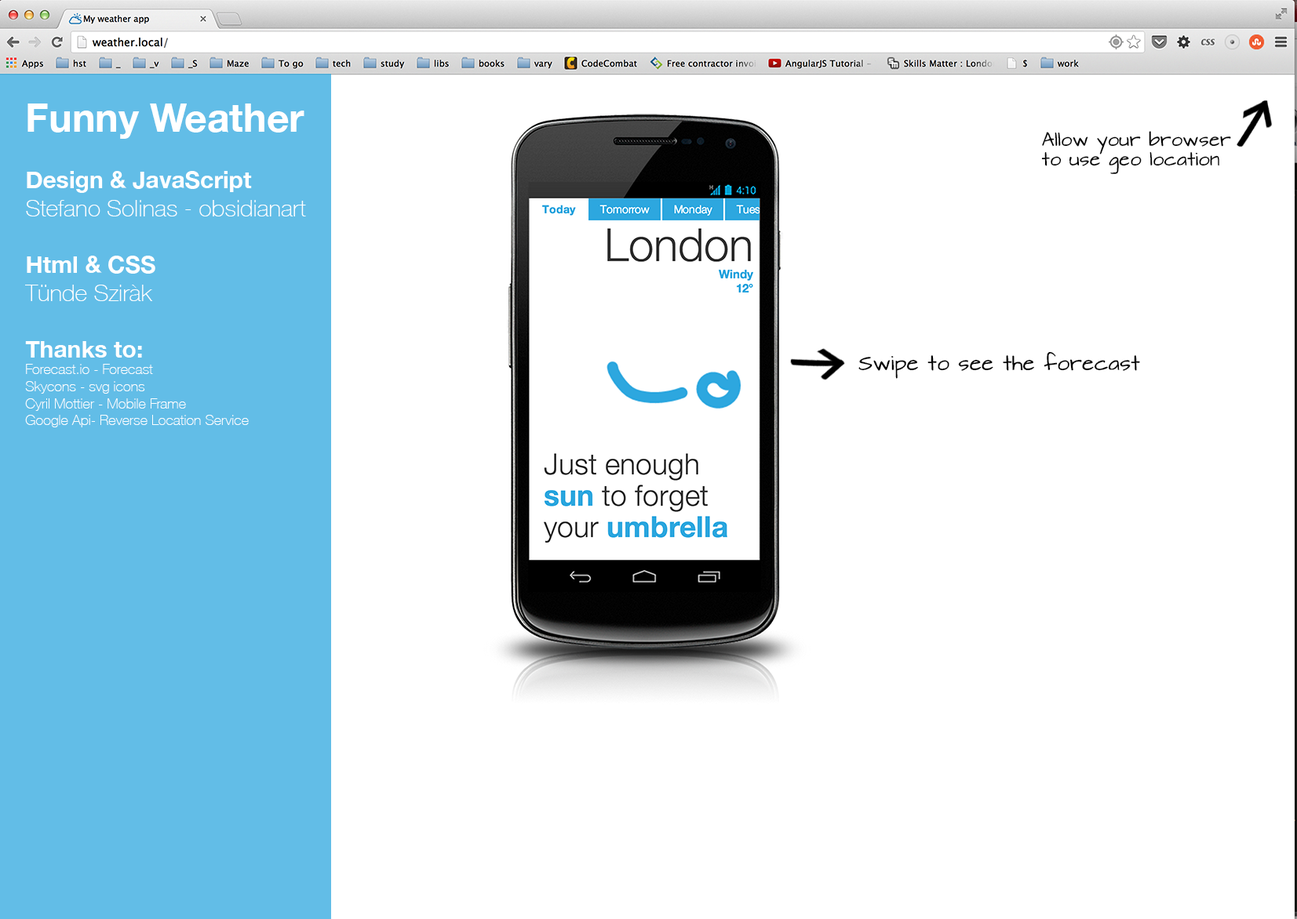
<style>
.page{position:relative;width:1297px;height:919px;background:#ffffff}
.page>*{position:absolute;margin:0}
.t1{font:14.1px "HelveticaNeue-Thin";color:#ffffff}
.t2{font:39.2px "HelveticaNeue-Bold";color:#ffffff}
.t3{font:23.5px "HelveticaNeue-Bold";color:#ffffff}
.t4{font:23.5px "HelveticaNeue-Thin";color:#ffffff}
.t5{font:16.2px "ArchitectsDaughter";color:#000000}
.t6{font:17.9px "ArchitectsDaughter";color:#000000}
</style>
<div class="page">
<p class="t1" style="left:25px;top:104px;width:281px;height:324px"><span class="t2">Funny Weather<br></span><span class="t3"><br>Design &amp; JavaScript<br></span><span class="t4">Stefano Solinas - obsidianart<br><br></span><span class="t3">Html &amp; CSS<br></span><span class="t4">Tünde Sziràk<br><br></span><span class="t3">Thanks to:<br></span>Forecast.io - Forecast<br>Skycons - svg icons<br>Cyril Mottier - Mobile Frame<br>Google Api- Reverse Location Service</p>
<p class="t5" style="left:1041px;top:131px;width:190px;height:43px">Allow your browser<br>to use geo location</p>
<p class="t6" style="left:858px;top:351px;width:282px;height:28px">Swipe to see the forecast</p>
</div>
